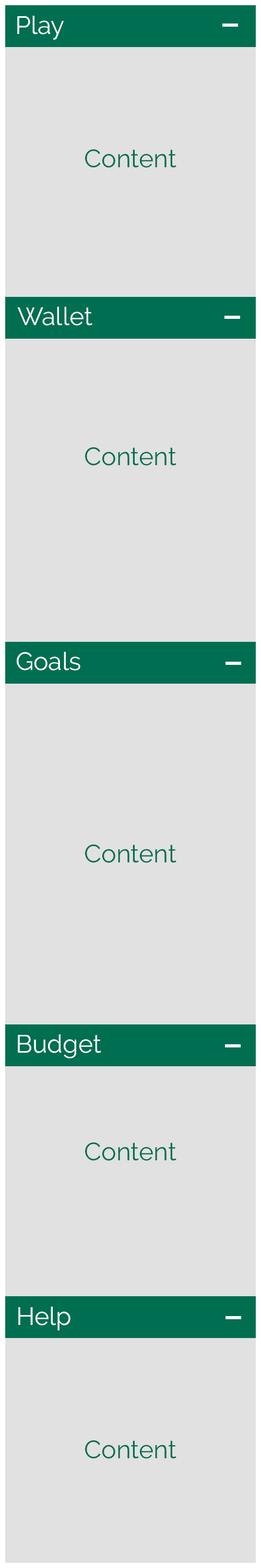
<style>
.page{position:relative;width:261px;height:1568px;background:#e1e1e1}
.page>*{position:absolute;margin:0}
.t1{font:25.1px "Raleway-Regular";color:#ffffff}
</style>
<div class="page">
<p class="t1" style="left:17px;top:16px;width:47px;height:24px">Play</p>
<p class="t1" style="left:17px;top:307px;width:76px;height:19px">Wallet</p>
<p class="t1" style="left:17px;top:652px;width:63px;height:19px">Goals</p>
<p class="t1" style="left:18px;top:1034px;width:83px;height:24px">Budget</p>
<p class="t1" style="left:18px;top:1307px;width:53px;height:24px">Help</p>
</div>
